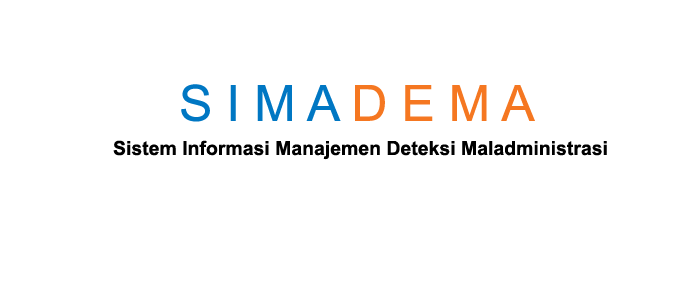
<style>
.page{position:relative;width:700px;height:300px;background:#ffffff}
.page>*{position:absolute;margin:0}
.t1{font:50px "ArialMT";color:#0077c3}
.t2{font:50px "ArialMT";color:#f57721}
.t3{font:19.4px "Arial-BoldMT";color:#000000}
</style>
<div class="page">
<p class="t1" style="left:181px;top:84px;width:354px;height:38px">S I M A<span class="t2"> D E M A</span></p>
<p class="t3" style="left:113px;top:140px;width:494px;height:20px">Sistem Informasi Manajemen Deteksi Maladministrasi</p>
</div>
